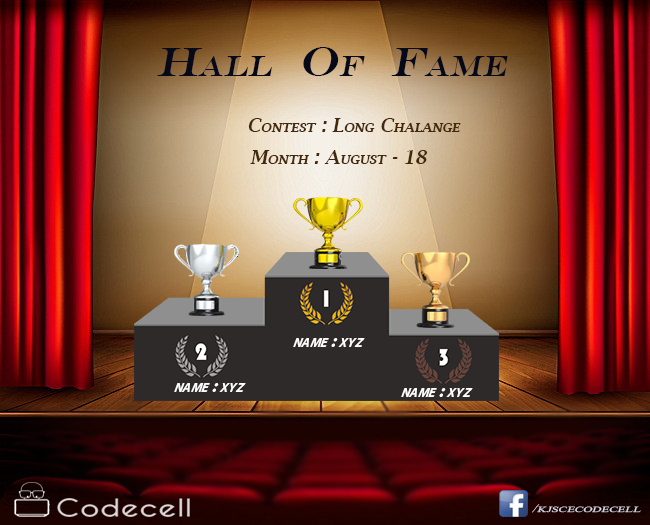
<style>
.page{position:relative;width:650px;height:525px}
.page>*{position:absolute;margin:0}
.t1{font:41.7px "EngraversMT";letter-spacing:0.003em;color:#060919;font-variant:small-caps;font-style:italic}
.t2{font:18.8px "LucidaBright-Demi";letter-spacing:0.003em;color:#43280a;font-variant:small-caps;font-style:italic}
.t3{font:18.8px "MyriadPro-BoldIt";letter-spacing:0.003em;color:#fffefe;font-variant:small-caps;font-style:italic}
.t4{font:16.7px "Microsoft-Himalaya";color:#dcdfe9;font-variant:small-caps;font-style:italic;scale:1.62 1}
</style>
<div class="page">
<p class="t1" style="left:157px;top:47px;width:351px;height:29px">Hall  Of  Fame</p>
<p class="t2" style="left:248px;top:118px;width:213px;height:14px">Contest : Long Chalange</p>
<p class="t2" style="left:250px;top:150px;width:177px;height:14px">Month : August - 18</p>
<p class="t3" style="left:293px;top:338px;width:72px;height:9px">name : xyz</p>
<p class="t3" style="left:174px;top:383px;width:72px;height:9px">name : xyz</p>
<p class="t3" style="left:401px;top:388px;width:72px;height:9px">name : xyz</p>
<p class="t4" style="left:532px;top:504px;width:109px;height:9px">/kjscecodecell</p>
</div>
